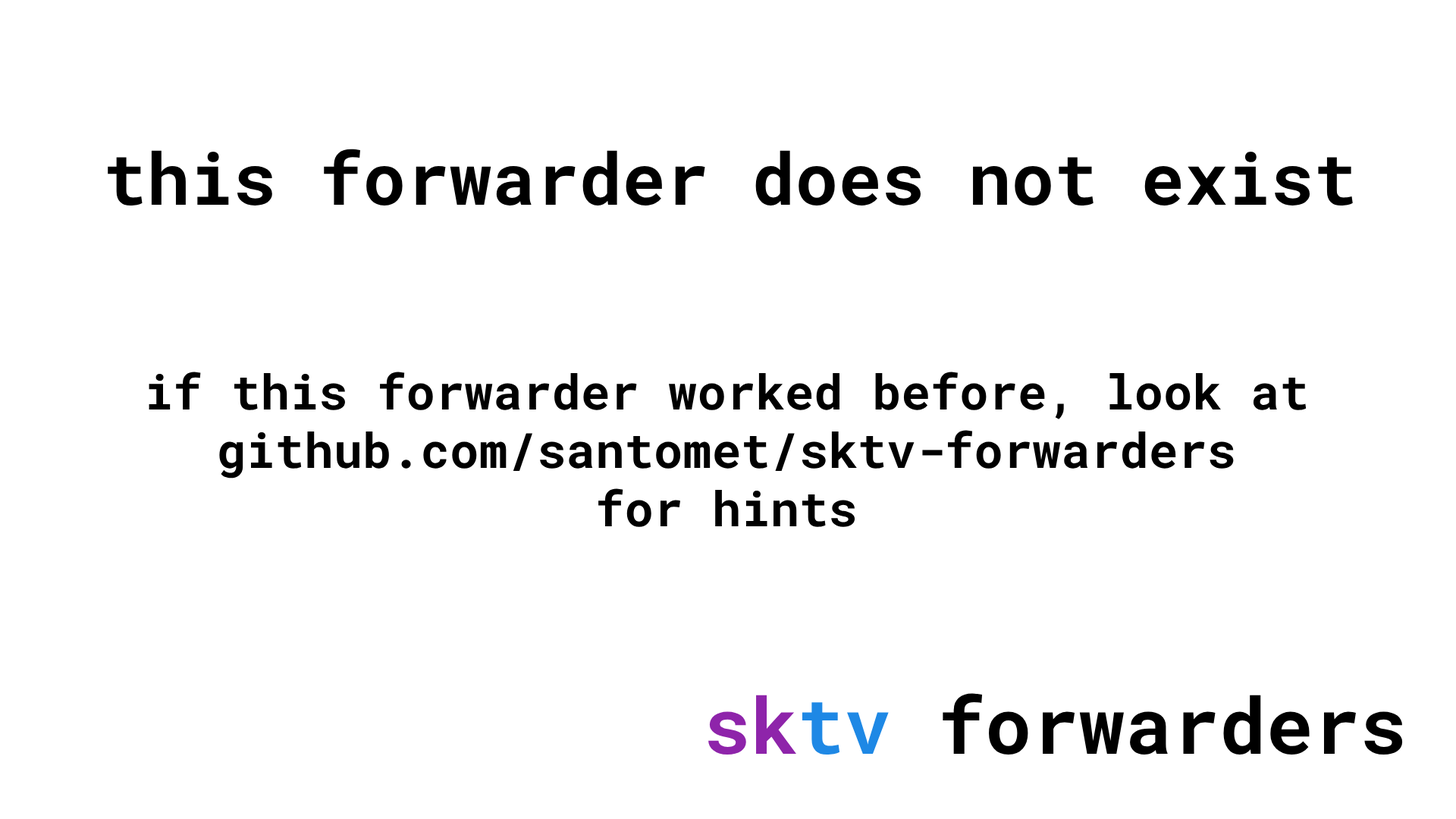
<style>
.page{position:relative;width:1456px;height:819px;background:#ffffff}
.page>*{position:absolute;margin:0}
.t1{font:72px "RobotoMono-Bold";color:#000000}
.t2{font:48.5px "RobotoMono-Bold";color:#000000}
.t3{font:78.1px "RobotoMono-Bold";color:#000000}
.t4{font:78.1px "RobotoMono-Bold";color:#8e24aa}
.t5{font:78.1px "RobotoMono-Bold";color:#1e88e5}
</style>
<div class="page">
<p class="t1" style="left:108px;top:149px;width:1245px;height:57px">this forwarder does not exist</p>
<p class="t2" style="left:149px;top:372px;width:1158px;height:155px;text-align:center">if this forwarder worked before, look at<br>github.com/santomet/sktv-forwarders<br>for hints</p>
<p class="t3" style="left:708px;top:693px;width:695px;height:62px"><span class="t4">sk</span><span class="t5">tv </span>forwarders</p>
</div>
